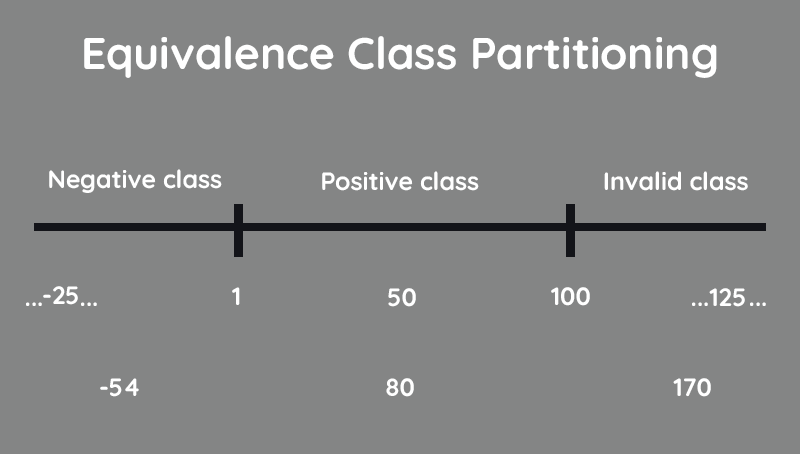
<style>
.page{position:relative;width:800px;height:454px;background:#848585}
.page>*{position:absolute;margin:0}
.t1{font:44.4px "Quicksand-Bold";color:#ffffff}
.t2{font:25px "Quicksand-Bold";color:#ffffff}
</style>
<div class="page">
<p class="t1" style="left:84px;top:36px;width:633px;height:42px">Equivalence Class Partitioning</p>
<p class="t2" style="left:49px;top:169px;width:173px;height:24px">Negative class</p>
<p class="t2" style="left:322px;top:171px;width:157px;height:20px">Positive class</p>
<p class="t2" style="left:604px;top:171px;width:144px;height:20px">Invalid class</p>
<p class="t2" style="left:43px;top:286px;width:35px;height:19px">-25</p>
<p class="t2" style="left:232px;top:287px;width:8px;height:18px">1</p>
<p class="t2" style="left:388px;top:288px;width:28px;height:19px">50</p>
<p class="t2" style="left:551px;top:287px;width:39px;height:19px">100</p>
<p class="t2" style="left:709px;top:288px;width:36px;height:19px">125</p>
<p class="t2" style="left:26px;top:302px;width:16px;height:4px">...</p>
<p class="t2" style="left:81px;top:302px;width:16px;height:4px">...</p>
<p class="t2" style="left:692px;top:302px;width:16px;height:4px">...</p>
<p class="t2" style="left:750px;top:302px;width:16px;height:4px">...</p>
<p class="t2" style="left:100px;top:378px;width:39px;height:19px">-54</p>
<p class="t2" style="left:386px;top:378px;width:28px;height:19px">80</p>
<p class="t2" style="left:673px;top:378px;width:38px;height:19px">170</p>
</div>
